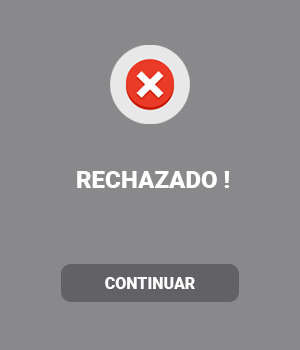
<style>
.page{position:relative;width:300px;height:350px;background:#89898b}
.page>*{position:absolute;margin:0}
.t1{font:24px "Roboto-Black";color:#ffffff}
.t2{font:16px "Roboto-Black";color:#ffffff}
</style>
<div class="page">
<p class="t1" style="left:77px;top:171px;width:153px;height:17px">RECHAZADO !</p>
<p class="t2" style="left:105px;top:277px;width:90px;height:12px">CONTINUAR</p>
</div>
